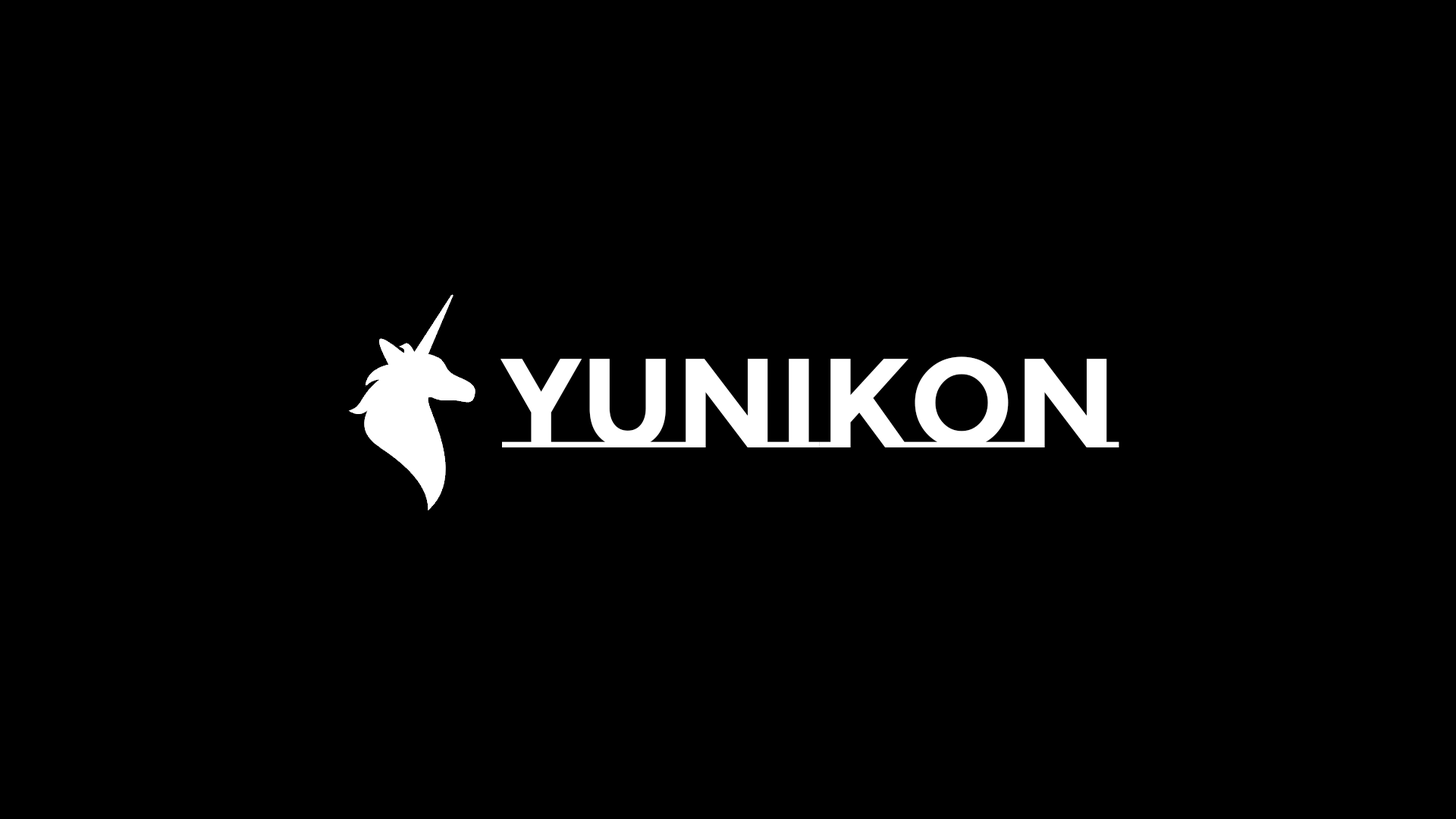
<style>
.page{position:relative;width:1456px;height:819px;background:#000000}
.page>*{position:absolute;margin:0}
.t1{font:126.4px "MontserratSubrayada-Bold";color:#ffffff}
</style>
<div class="page">
<p class="t1" style="left:500px;top:356px;width:619px;height:91px">Yunikon</p>
</div>
